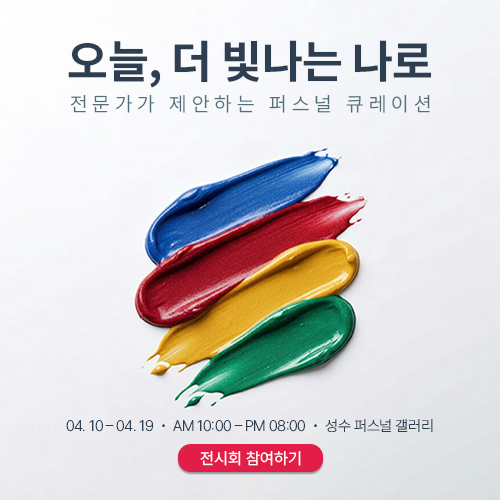
<style>
.page{position:relative;width:500px;height:500px}
.page>*{position:absolute;margin:0}
.t1{font:44.3px "NotoSansKR-Bold";letter-spacing:-0.01em;color:#2c3e50}
.t2{font:20.1px "Pretendard-Light";letter-spacing:0.25em;color:#546e7a}
.t3{font:15.1px "Pretendard-ExtraLight";letter-spacing:-0.02em;color:#2c3e50}
.t4{font:16.1px "Pretendard-Regular";color:#ffffff}
</style>
<div class="page">
<p class="t1" style="left:68px;top:40px;width:364px;height:48px">오늘, 더 빛나는 나로</p>
<p class="t2" style="left:70px;top:95px;width:360px;height:18px">전문가가 제안하는 퍼스널 큐레이션</p>
<p class="t3" style="left:66px;top:419px;width:367px;height:13px">04. 10 – 04. 19  •  AM 10:00 – PM 08:00  •  성수 퍼스널 갤러리</p>
<p class="t4" style="left:200px;top:451px;width:101px;height:15px">전시회 참여하기</p>
</div>
